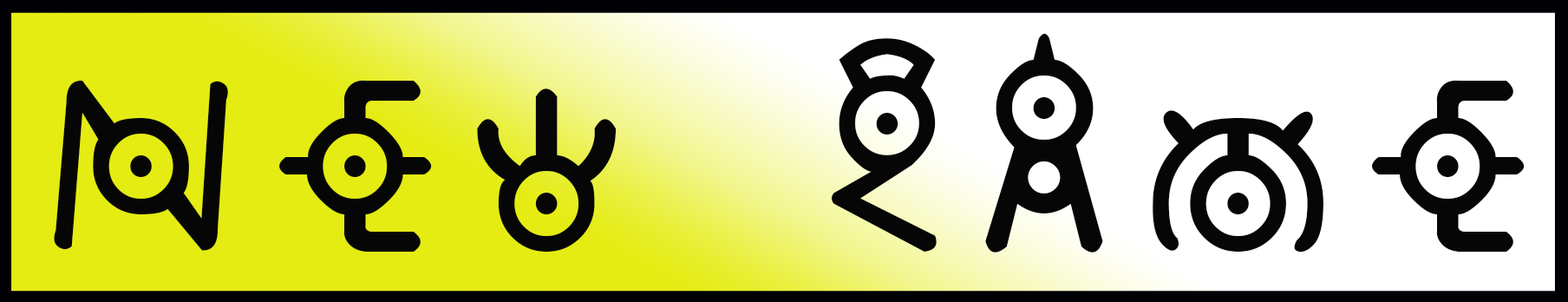
<style>
.page{position:relative;width:1568px;height:302px;background:#ffffff}
.page>*{position:absolute;margin:0}
.t1{font:272.8px "annone";letter-spacing:0.1em;color:#060606}
</style>
<div class="page">
<p class="t1" style="left:54px;top:33px;width:1471px;height:219px">NEW GAME</p>
</div>
